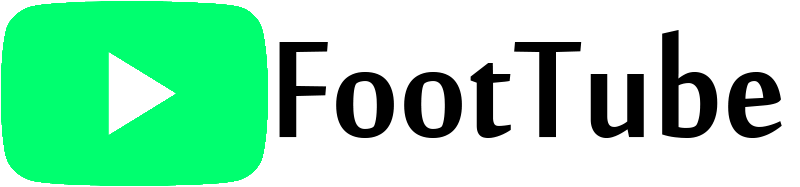
<style>
.page{position:relative;width:800px;height:187px;background:#ffffff}
.page>*{position:absolute;margin:0}
.t1{font:210px "MoolBoran";color:#000000;scale:0.91 1}
</style>
<div class="page">
<p class="t1" style="left:279px;top:30px;width:503px;height:108px">FootTube</p>
</div>
